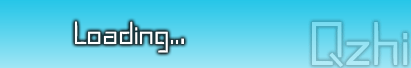
<style>
.page{position:relative;width:411px;height:68px}
.page>*{position:absolute;margin:0}
.t1{font:37.5px "FZZHYJW--GB1-0";letter-spacing:0.01em;color:#ffffff}
.t2{font:50px "FZZHYJW--GB1-0";letter-spacing:0.01em;color:#ffffff}
</style>
<div class="page">
<p class="t1" style="left:74px;top:21px;width:110px;height:32px">Loading..<span class="t2">.</span></p>
</div>
